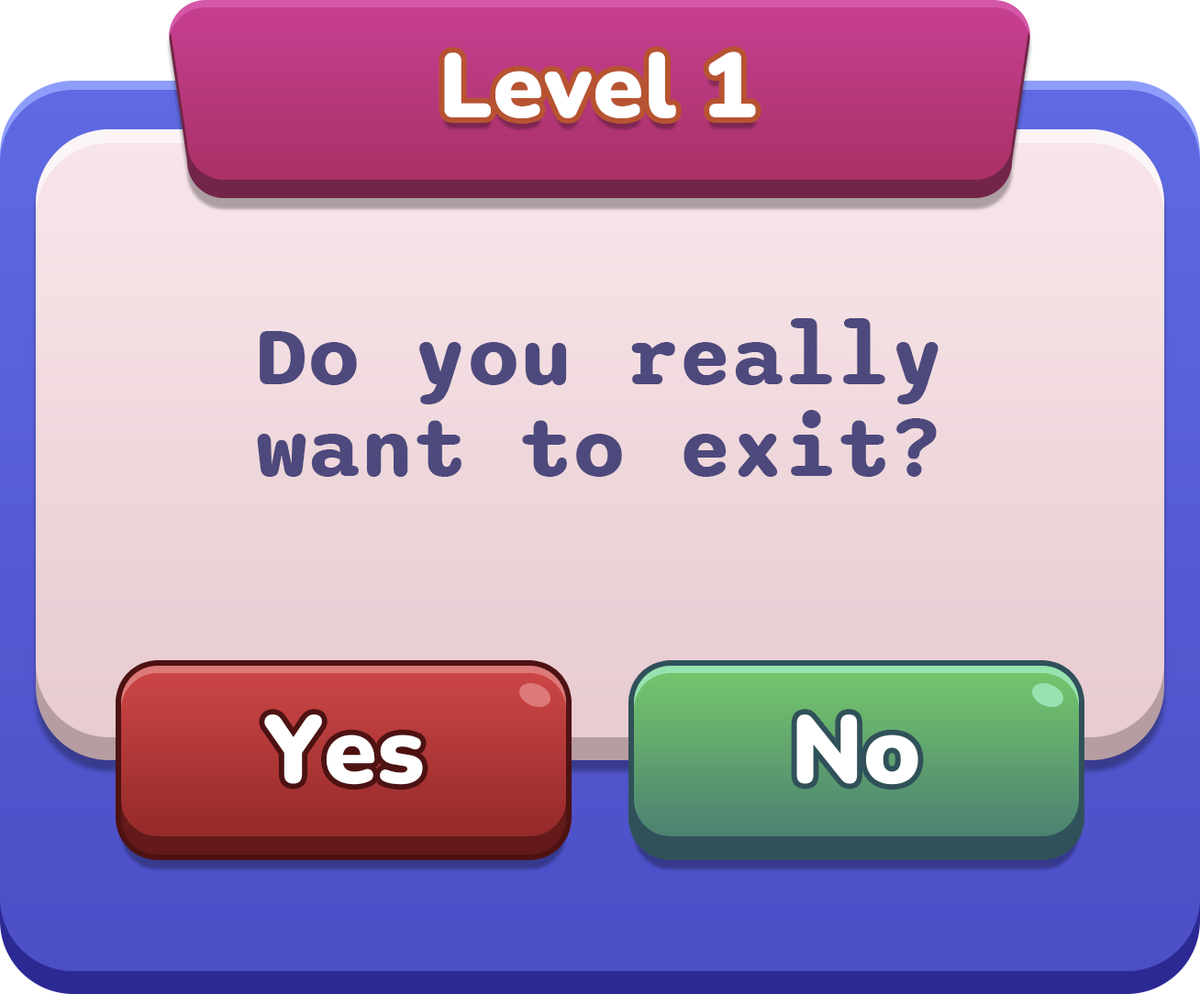
<style>
.page{position:relative;width:1200px;height:994px}
.page>*{position:absolute;margin:0}
.t1{font:91.7px "Nunito-Black";color:#ffffff}
.t2{font:85.6px/91.7px "Sono-Bold";color:#4e497c}
.t3{font:95.4px "Nunito-Black";color:#ffffff}
</style>
<div class="page">
<p class="t1" style="left:444px;top:51px;width:312px;height:67px">Level 1</p>
<p class="t2" style="left:257px;top:318px;width:681px;height:159px;text-align:center">Do you really<br>want to exit?</p>
<p class="t3" style="left:264px;top:714px;width:159px;height:71px">Yes</p>
<p class="t3" style="left:796px;top:714px;width:122px;height:71px">No</p>
</div>
